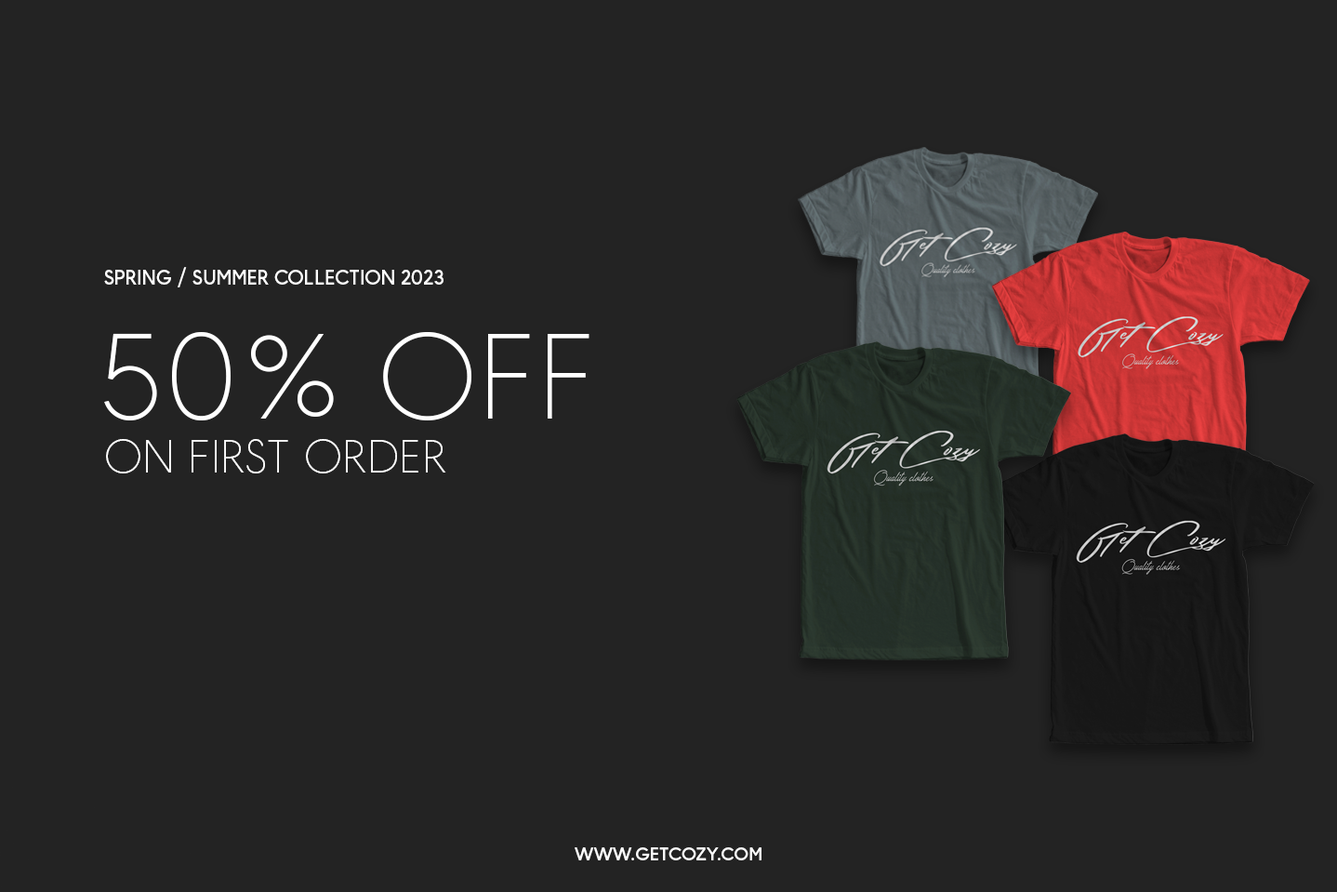
<style>
.page{position:relative;width:1337px;height:892px;background:#232323}
.page>*{position:absolute;margin:0}
.t1{font:20.2px "MADEOkineSansPERSONALUSE-Regular";color:#ffffff}
.t2{font:121.3px "MADEOkineSansPERSONALUSE-Thin";color:#ffffff}
.t3{font:46.5px "MADEOkineSansPERSONALUSE-Thin";color:#ffffff}
.t4{font:18.5px "MADEOkineSansPERSONALUSE-Regular";color:#ffffff}
</style>
<div class="page">
<p class="t1" style="left:104px;top:267px;width:340px;height:20px">SPRING / SUMMER COLLECTION 2023</p>
<p class="t2" style="left:104px;top:331px;width:486px;height:89px">50% OFF</p>
<p class="t3" style="left:106px;top:439px;width:340px;height:34px">ON FIRST ORDER</p>
<p class="t4" style="left:575px;top:847px;width:187px;height:13px">WWW.GETCOZY.COM</p>
</div>
